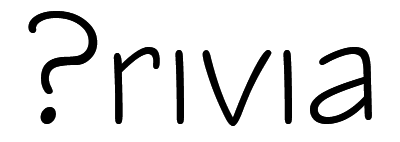
<style>
.page{position:relative;width:400px;height:142px;background:#ffffff}
.page>*{position:absolute;margin:0}
.t1{font:166.7px "StylusBT";color:#000000}
</style>
<div class="page">
<p class="t1" style="left:28px;top:11px;width:344px;height:115px">?rivia</p>
</div>
